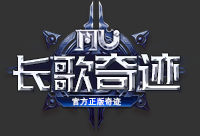
<style>
.page{position:relative;width:200px;height:136px;background:#333333}
.page>*{position:absolute;margin:0}
.t1{font:59.6px "HuXiaoBoKuHei";letter-spacing:-0.01em;scale:0.7 1}
.t2{font:63.1px "HuXiaoBoKuHei";letter-spacing:-0.01em;scale:0.7 1}
.t3{font:8.1px "DengXian";letter-spacing:0.032em;color:#ffffff}
</style>
<div class="page">
<p class="t1" style="left:13px;top:53px;width:167px;height:39px">长歌<span class="t2">奇迹</span></p>
<p class="t3" style="left:72px;top:97px;width:49px;height:9px">官方正版奇迹</p>
</div>
